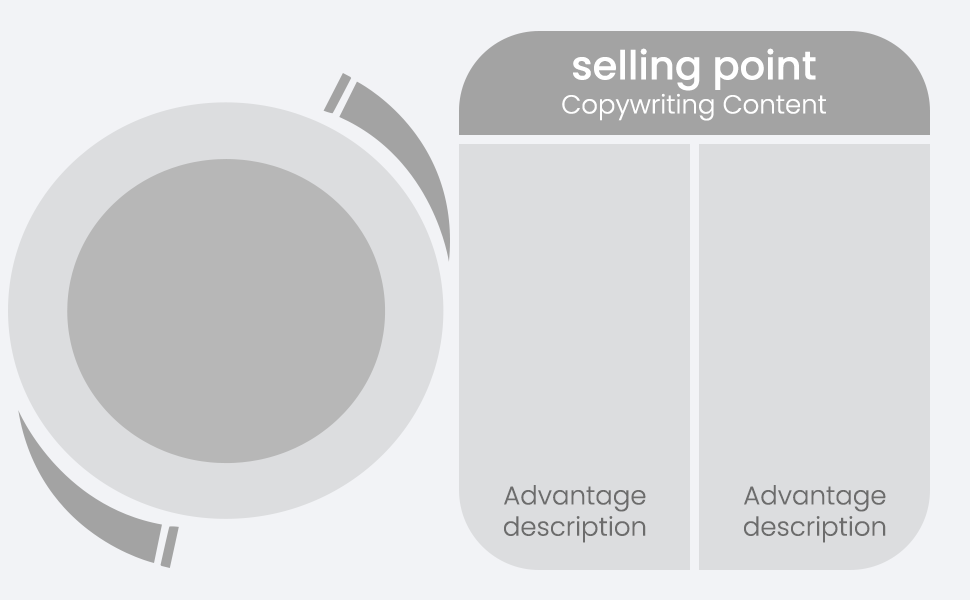
<style>
.page{position:relative;width:970px;height:600px;background:#dcdddf}
.page>*{position:absolute;margin:0}
.t1{font:40px "Poppins-Medium";color:#ffffff}
.t2{font:26px "Poppins-Light";color:#ffffff}
.t3{font:26px "Poppins-Light";color:#6c6c6c}
</style>
<div class="page">
<p class="t1" style="left:573px;top:48px;width:243px;height:43px">selling point</p>
<p class="t2" style="left:562px;top:93px;width:264px;height:28px">Copywriting Content</p>
<p class="t3" style="left:504px;top:485px;width:142px;height:58px;text-align:center">Advantage<br>description</p>
<p class="t3" style="left:744px;top:485px;width:142px;height:58px;text-align:center">Advantage<br>description</p>
</div>
